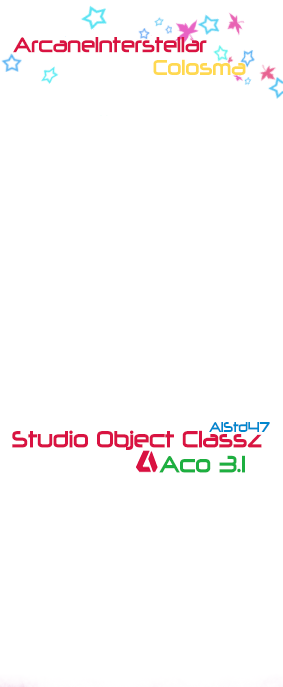
<style>
.page{position:relative;width:283px;height:687px;background:#ffffff}
.page>*{position:absolute;margin:0}
.t1{font:24px "497-CAI978";color:#d91342;scale:0.8 1}
.t2{font:24px "497-CAI978";color:#ffd951;scale:0.8 1}
.t3{font:16px "497-CAI978";color:#0087ce;scale:0.8 1}
.t4{font:26.7px "497-CAI978";color:#d91342;scale:0.8 1}
.t5{font:26.7px "497-CAI978";color:#1daf40;scale:0.8 1}
</style>
<div class="page">
<p class="t1" style="left:13px;top:37px;width:194px;height:16px">ArcaneInterstellar</p>
<p class="t2" style="left:153px;top:59px;width:93px;height:16px">Colosma</p>
<p class="t3" style="left:209px;top:422px;width:61px;height:10px">AIStd47</p>
<p class="t4" style="left:12px;top:430px;width:250px;height:20px">Studio Object Classz</p>
<p class="t5" style="left:159px;top:455px;width:86px;height:18px">Aco 3.1</p>
</div>
